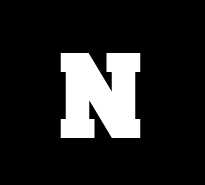
<style>
.page{position:relative;width:205px;height:185px;background:#000000}
.page>*{position:absolute;margin:0}
.t1{font:102px "Freshman";letter-spacing:-0.005em;color:#ffffff}
</style>
<div class="page">
<p class="t1" style="left:60px;top:53px;width:81px;height:85px">N</p>
</div>
